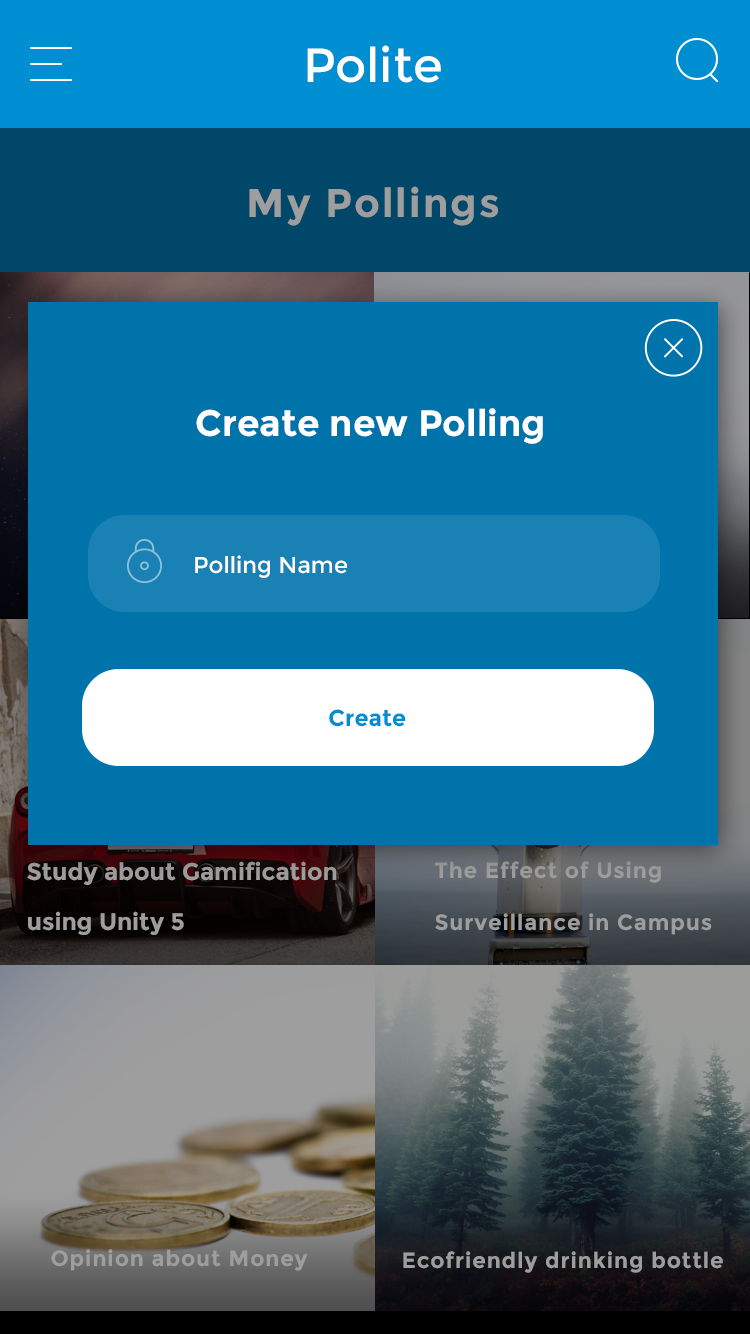
<style>
.page{position:relative;width:750px;height:1334px;background:#0073ab}
.page>*{position:absolute;margin:0}
.t1{font:48px "Montserrat-Regular";color:#ffffff}
.t2{font:40px "Montserrat-Bold";letter-spacing:0.05em;color:#9e9e9e}
.t3{font:36.6px "Montserrat-Bold";color:#ffffff}
.t4{font:22.9px "Montserrat-Regular";color:#ffffff}
.t5{font:22.9px "Montserrat-Bold";color:#008ed3}
.t6{font:24px/50px "Montserrat-Bold";color:#9d9d9d}
.t7{font:22px/52px "Montserrat-Bold";letter-spacing:0.04em;color:#9e9e9e}
.t8{font:22px "Montserrat-Bold";letter-spacing:0.04em;color:#9e9e9e}
</style>
<div class="page">
<p class="t1" style="left:307px;top:45px;width:134px;height:38px">Polite</p>
<p class="t2" style="left:249px;top:186px;width:249px;height:40px">My Pollings</p>
<p class="t3" style="left:196px;top:408px;width:347px;height:36px">Create new Polling</p>
<p class="t4" style="left:195px;top:555px;width:152px;height:23px">Polling Name</p>
<p class="t5" style="left:329px;top:709px;width:77px;height:18px">Create</p>
<p class="t6" style="left:27px;top:861px;width:310px;height:74px">Study about Gamification <br>using Unity 5</p>
<p class="t7" style="left:435px;top:861px;width:277px;height:74px">The Effect of Using <br>Surveillance in Campus</p>
<p class="t8" style="left:51px;top:1249px;width:257px;height:22px">Opinion about Money</p>
<p class="t8" style="left:403px;top:1251px;width:320px;height:22px">Ecofriendly drinking bottle</p>
</div>
